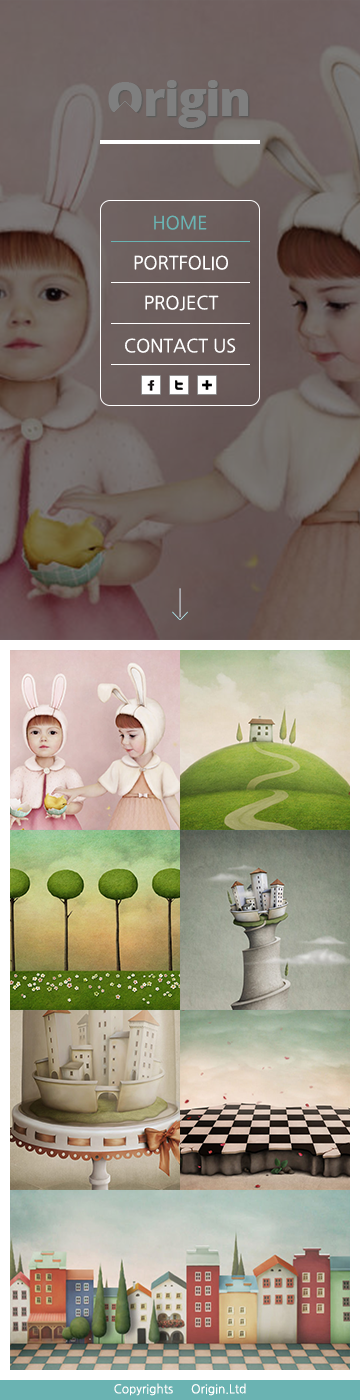
<style>
.page{position:relative;width:360px;height:1400px}
.page>*{position:absolute;margin:0}
.t1{font:18px "NanumGothic";color:#6ab3b2}
.t2{font:18px "NanumGothic";color:#ffffff}
.t3{font:12px "NanumGothic";color:#ffffff}
</style>
<div class="page">
<p class="t1" style="left:154px;top:215px;width:53px;height:15px">HOME</p>
<p class="t2" style="left:134px;top:255px;width:94px;height:16px">PORTFOLIO</p>
<p class="t2" style="left:145px;top:295px;width:74px;height:16px">PROJECT</p>
<p class="t2" style="left:125px;top:338px;width:111px;height:15px">CONTACT US</p>
<p class="t3" style="left:114px;top:1383px;width:132px;height:13px">Copyrights ⓒ Origin.Ltd</p>
</div>
